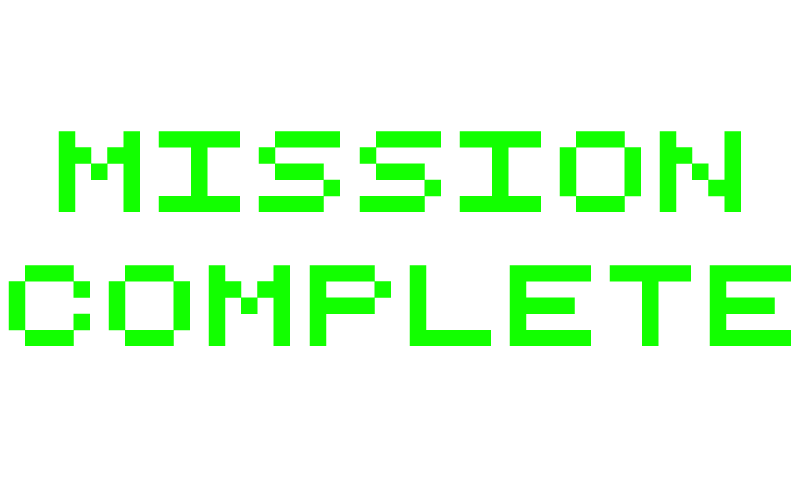
<style>
.page{position:relative;width:800px;height:480px;background:#ffffff}
.page>*{position:absolute;margin:0}
.t1{font:112px "RetroComputer";letter-spacing:0.05em;color:#12ff00;text-transform:uppercase}
</style>
<div class="page">
<p class="t1" style="left:8px;top:131px;width:783px;height:215px;text-align:center">Mission<br>complete</p>
</div>
